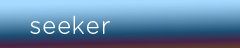
<style>
.page{position:relative;width:240px;height:48px}
.page>*{position:absolute;margin:0}
.t1{font:24px "GothamRounded-Light";color:#ffffff}
</style>
<div class="page">
<p class="t1" style="left:30px;top:15px;width:80px;height:19px">seeker</p>
</div>
